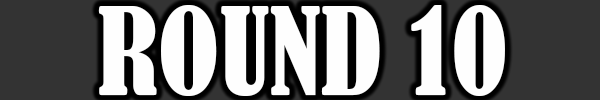
<style>
.page{position:relative;width:600px;height:100px;background:#333333}
.page>*{position:absolute;margin:0}
.t1{font:113px "BernardMT-Condensed";color:#fefefe}
</style>
<div class="page">
<p class="t1" style="left:98px;top:5px;width:407px;height:91px">ROUND 10</p>
</div>
